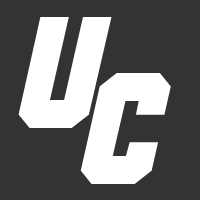
<style>
.page{position:relative;width:200px;height:200px;background:#333333}
.page>*{position:absolute;margin:0}
.t1{font:158.6px "Commando";letter-spacing:-0.02em;color:#ffffff}
</style>
<div class="page">
<p class="t1" style="left:18px;top:17px;width:94px;height:111px">U</p>
<p class="t1" style="left:80px;top:73px;width:91px;height:111px">C</p>
</div>
